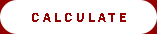
<style>
.page{position:relative;width:157px;height:34px;background:#ffffff}
.page>*{position:absolute;margin:0}
.t1{font:14.1px "WorkSansRoman-Bold";letter-spacing:0.3em;color:#940000;scale:0.82 1}
</style>
<div class="page">
<p class="t1" style="left:32px;top:13px;width:94px;height:9px">CALCULATE</p>
</div>
